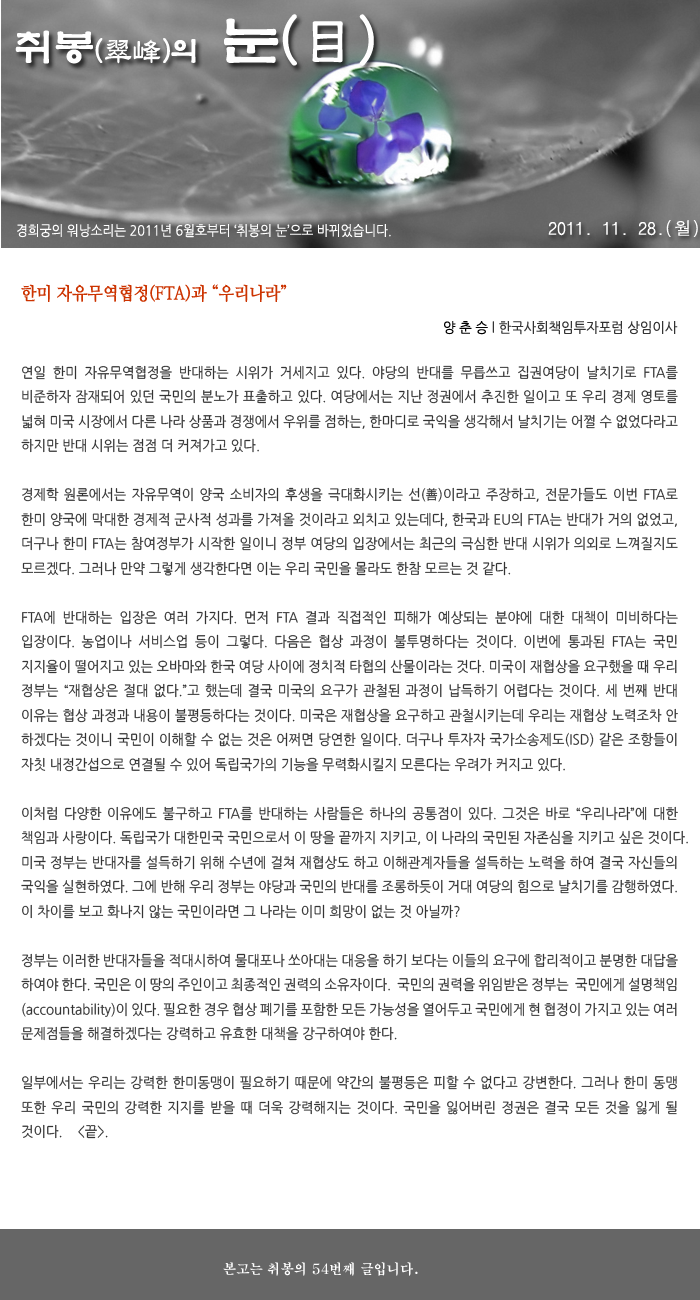
<style>
.page{position:relative;width:700px;height:1300px;background:#ffffff}
.page>*{position:absolute;margin:0}
.t1{font:28.6px "YetR-HM";color:#ffffff}
.t2{font:39.6px "YetR-HM";color:#ffffff}
.t3{font:57.3px "YetR-HM";color:#ffffff}
.t4{font:18px "DotumChe";color:#ffffff}
.t5{font:14px "NanumGothic";color:#ffffff;scale:0.9 1}
.t6{font:18px "NanumMyeongjoBold";color:#cc3300;scale:0.9 1}
.t7{font:14px "NanumGothic";color:#333333;scale:0.95 1}
.t8{font:14px "NanumGothic";color:#000000;scale:0.95 1}
.t9{font:14px "H2mjrE";color:#ffffff;scale:0.95 1}
</style>
<div class="page">
<p class="t1" style="left:15px;top:14px;width:359px;height:52px"><span class="t2">취봉</span>(翠峰)의  <span class="t3">눈(目)</span></p>
<p class="t4" style="left:548px;top:220px;width:150px;height:17px">2011. 11. 28.(월)</p>
<p class="t5" style="left:17px;top:224px;width:374px;height:14px">경희궁의 워낭소리는 2011년 6월호부터 ‘취봉의 눈’으로 바뀌었습니다.</p>
<p class="t6" style="left:21px;top:284px;width:266px;height:18px">한미 자유무역협정(FTA)과 “우리나라”</p>
<p class="t7" style="left:444px;top:321px;width:234px;height:14px"><span class="t8">양 춘 승 </span>l 한국사회책임투자포럼 상임이사</p>
<p class="t7" style="left:21px;top:365px;width:667px;height:774px;text-align:justify">연일 한미 자유무역협정을 반대하는 시위가 거세지고 있다. 야당의 반대를 무릅쓰고 집권여당이 날치기로 FTA를 비준하자 잠재되어 있던 국민의 분노가 표출하고 있다. 여당에서는 지난 정권에서 추진한 일이고 또 우리 경제 영토를 넓혀 미국 시장에서 다른 나라 상품과 경쟁에서 우위를 점하는, 한마디로 국익을 생각해서 날치기는 어쩔 수 없었다라고 하지만 반대 시위는 점점 더 커져가고 있다.<br><br>경제학 원론에서는 자유무역이 양국 소비자의 후생을 극대화시키는 선(善)이라고 주장하고, 전문가들도 이번 FTA로 한미 양국에 막대한 경제적 군사적 성과를 가져올 것이라고 외치고 있는데다, 한국과 EU의 FTA는 반대가 거의 없었고, 더구나 한미 FTA는 참여정부가 시작한 일이니 정부 여당의 입장에서는 최근의 극심한 반대 시위가 의외로 느껴질지도 모르겠다. 그러나 만약 그렇게 생각한다면 이는 우리 국민을 몰라도 한참 모르는 것 같다.<br><br>FTA에 반대하는 입장은 여러 가지다. 먼저 FTA 결과 직접적인 피해가 예상되는 분야에 대한 대책이 미비하다는 입장이다. 농업이나 서비스업 등이 그렇다. 다음은 협상 과정이 불투명하다는 것이다. 이번에 통과된 FTA는 국민 지지율이 떨어지고 있는 오바마와 한국 여당 사이에 정치적 타협의 산물이라는 것다. 미국이 재협상을 요구했을 때 우리 정부는 “재협상은 절대 없다.”고 했는데 결국 미국의 요구가 관철된 과정이 납득하기 어렵다는 것이다. 세 번째 반대 이유는 협상 과정과 내용이 불평등하다는 것이다. 미국은 재협상을 요구하고 관철시키는데 우리는 재협상 노력조차 안 하겠다는 것이니 국민이 이해할 수 없는 것은 어쩌면 당연한 일이다. 더구나 투자자 국가소송제도(ISD) 같은 조항들이 자칫 내정간섭으로 연결될 수 있어 독립국가의 기능을 무력화시킬지 모른다는 우려가 커지고 있다.<br><br>이처럼 다양한 이유에도 불구하고 FTA를 반대하는 사람들은 하나의 공통점이 있다. 그것은 바로 “우리나라”에 대한 책임과 사랑이다. 독립국가 대한민국 국민으로서 이 땅을 끝까지 지키고, 이 나라의 국민된 자존심을 지키고 싶은 것이다.<br>미국 정부는 반대자를 설득하기 위해 수년에 걸쳐 재협상도 하고 이해관계자들을 설득하는 노력을 하여 결국 자신들의 국익을 실현하였다. 그에 반해 우리 정부는 야당과 국민의 반대를 조롱하듯이 거대 여당의 힘으로 날치기를 감행하였다. 이 차이를 보고 화나지 않는 국민이라면 그 나라는 이미 희망이 없는 것 아닐까?<br><br>정부는 이러한 반대자들을 적대시하여 물대포나 쏘아대는 대응을 하기 보다는 이들의 요구에 합리적이고 분명한 대답을 하여야 한다. 국민은 이 땅의 주인이고 최종적인 권력의 소유자이다.  국민의 권력을 위임받은 정부는  국민에게 설명책임(accountability)이 있다. 필요한 경우 협상 폐기를 포함한 모든 가능성을 열어두고 국민에게 현 협정이 가지고 있는 여러 문제점들을 해결하겠다는 강력하고 유효한 대책을 강구하여야 한다. <br><br>일부에서는 우리는 강력한 한미동맹이 필요하기 때문에 약간의 불평등은 피할 수 없다고 강변한다. 그러나 한미 동맹 또한 우리 국민의 강력한 지지를 받을 때 더욱 강력해지는 것이다. 국민을 잃어버린 정권은 결국 모든 것을 잃게 될 것이다.    &lt;끝&gt;.</p>
<p class="t9" style="left:223px;top:1262px;width:195px;height:14px">본고는 취봉의 54번째 글입니다.</p>
</div>
